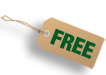
<style>
.page{position:relative;width:106px;height:75px;background:#ffffff}
.page>*{position:absolute;margin:0}
.t1{font:22.1px "HelveticaNeue-CondensedBlack";letter-spacing:-0.01em;color:#005826}
</style>
<div class="page">
<p class="t1" style="left:50px;top:28px;width:46px;height:31px;rotate:22deg">FREE</p>
</div>
